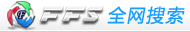
<style>
.page{position:relative;width:190px;height:32px;background:#ffffff}
.page>*{position:absolute;margin:0}
.t1{font:18px "MicrosoftYaHei";letter-spacing:0.08em;color:#169eff;font-style:italic}
</style>
<div class="page">
<p class="t1" style="left:107px;top:6px;width:78px;height:19px">全网搜索</p>
</div>
